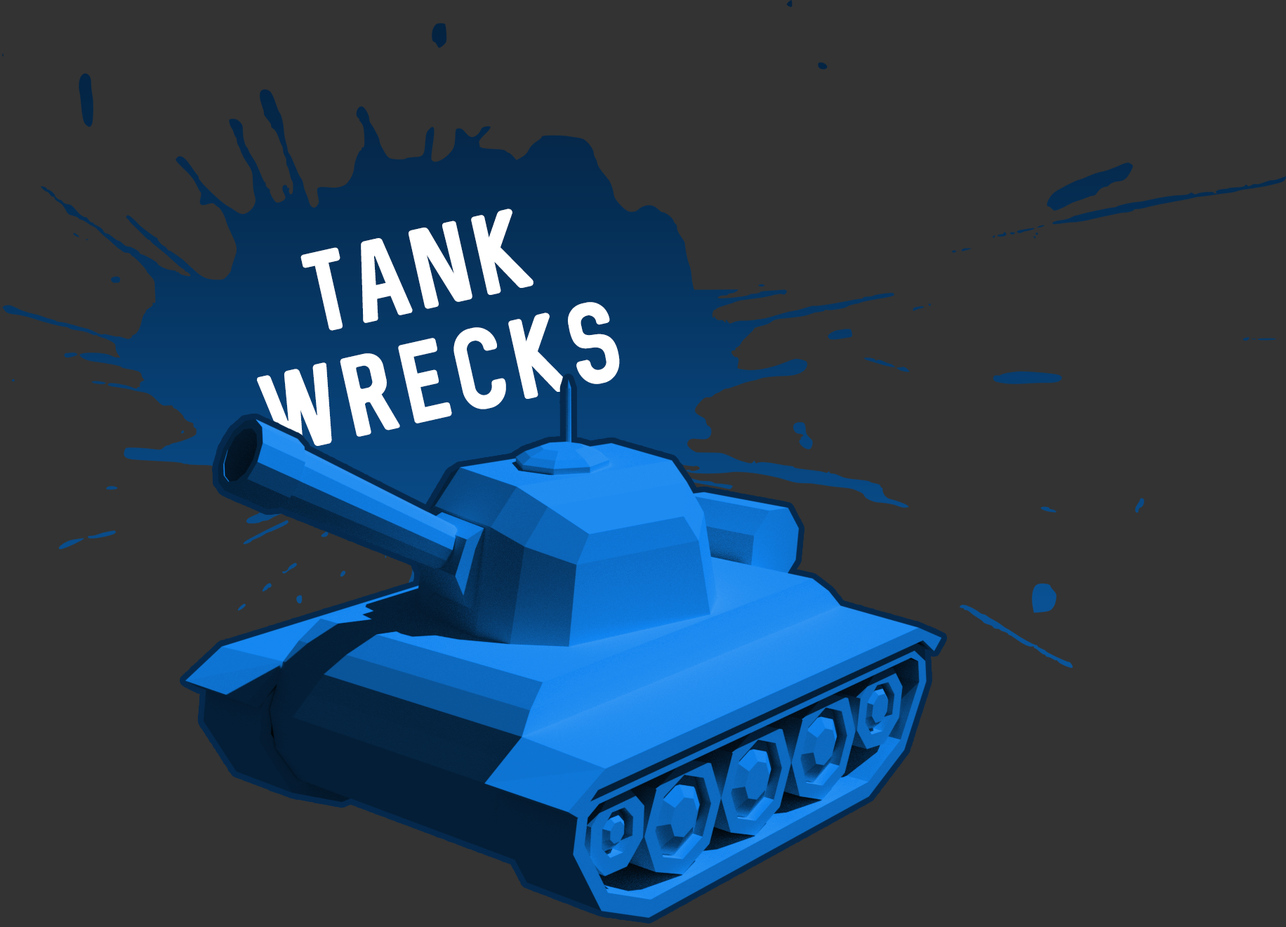
<style>
.page{position:relative;width:1286px;height:927px;background:#333333}
.page>*{position:absolute;margin:0}
.t1{font:91.3px "Sequel-Regular";letter-spacing:0.075em;color:#ffffff;text-transform:uppercase;scale:0.95 1}
</style>
<div class="page">
<p class="t1" style="left:257px;top:209px;width:363px;height:243px;text-align:center;rotate:-13deg">Tank<br>Wrecks</p>
</div>
